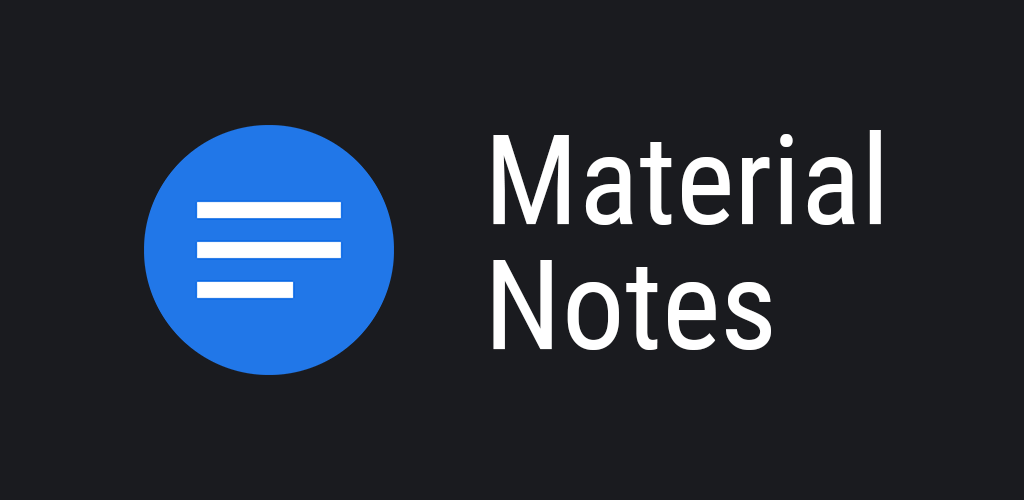
<style>
.page{position:relative;width:1024px;height:500px;background:#1a1b1f}
.page>*{position:absolute;margin:0}
.t1{font:125px/125px "RobotoCondensed-Regular";color:#ffffff}
.t2{font:125px/100px "RobotoCondensed-Regular";color:#ffffff}
</style>
<div class="page">
<p class="t1" style="left:493px;top:130px;width:388px;height:220px"><span class="t2">Ma</span>terial <br>No<span class="t2">tes</span></p>
</div>
